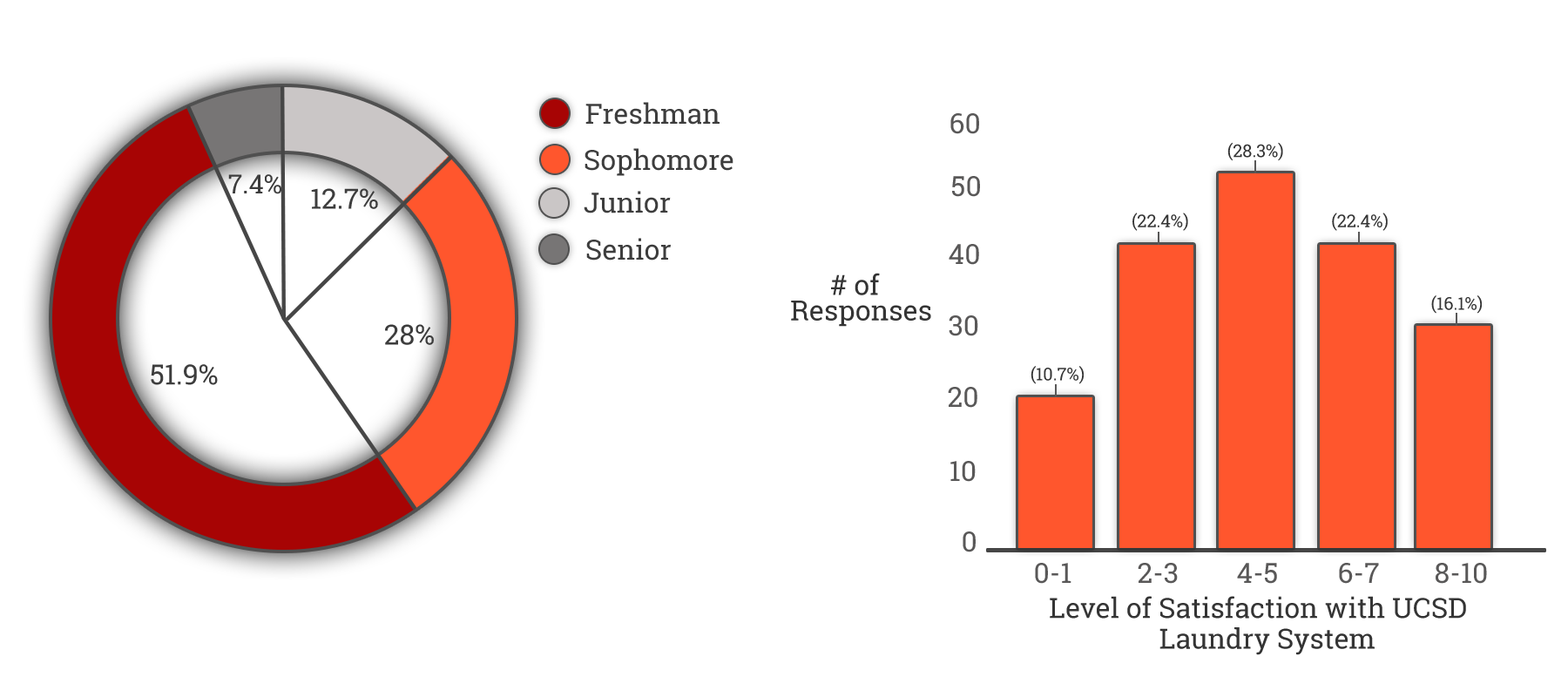
<style>
.page{position:relative;width:1568px;height:697px;background:#ffffff}
.page>*{position:absolute;margin:0}
.t1{font:27.9px "RobotoSlab-Regular";color:#3d3d3d}
.t2{font:27.9px "RobotoSlab-Regular";color:#595858}
.t3{font:17.4px "RobotoSlab-Regular";color:#343434}
.t4{font:26.1px "RobotoSlab-Regular";color:#3d3d3d}
.t5{font:27.9px "RobotoSlab-Regular";color:#343434}
</style>
<div class="page">
<p class="t1" style="left:585px;top:102px;width:135px;height:23px">Freshman</p>
<p class="t2" style="left:950px;top:113px;width:29px;height:21px">60</p>
<p class="t3" style="left:1227px;top:142px;width:56px;height:19px">(28.3%)</p>
<p class="t4" style="left:228px;top:174px;width:53px;height:20px">7.4%</p>
<p class="t2" style="left:952px;top:176px;width:28px;height:21px">50</p>
<p class="t1" style="left:311px;top:188px;width:67px;height:21px">12.7%</p>
<p class="t1" style="left:584px;top:191px;width:87px;height:22px">Junior</p>
<p class="t3" style="left:1132px;top:213px;width:56px;height:18px">(22.4%)</p>
<p class="t3" style="left:1332px;top:213px;width:56px;height:18px">(22.4%)</p>
<p class="t1" style="left:586px;top:238px;width:85px;height:22px">Senior</p>
<p class="t2" style="left:949px;top:244px;width:30px;height:21px">40</p>
<p class="t5" style="left:831px;top:273px;width:49px;height:22px"># of</p>
<p class="t5" style="left:791px;top:301px;width:140px;height:26px">Responses</p>
<p class="t3" style="left:1431px;top:295px;width:51px;height:19px">(16.1%)</p>
<p class="t2" style="left:949px;top:315px;width:29px;height:21px">30</p>
<p class="t1" style="left:385px;top:324px;width:49px;height:21px">28%</p>
<p class="t1" style="left:151px;top:364px;width:67px;height:21px">51.9%</p>
<p class="t3" style="left:1031px;top:366px;width:53px;height:18px">(10.7%)</p>
<p class="t2" style="left:948px;top:387px;width:29px;height:21px">20</p>
<p class="t2" style="left:950px;top:461px;width:26px;height:21px">10</p>
<p class="t2" style="left:963px;top:531px;width:13px;height:21px">0</p>
<p class="t2" style="left:1035px;top:563px;width:36px;height:21px">0-1</p>
<p class="t2" style="left:1138px;top:563px;width:40px;height:21px">2-3</p>
<p class="t2" style="left:1237px;top:563px;width:40px;height:21px">4-5</p>
<p class="t2" style="left:1339px;top:563px;width:40px;height:21px">6-7</p>
<p class="t2" style="left:1436px;top:563px;width:51px;height:21px">8-10</p>
<p class="t5" style="left:1050px;top:596px;width:416px;height:22px">Level of Satisfaction with UCSD</p>
<p class="t5" style="left:1159px;top:627px;width:216px;height:28px">Laundry System</p>
</div>
